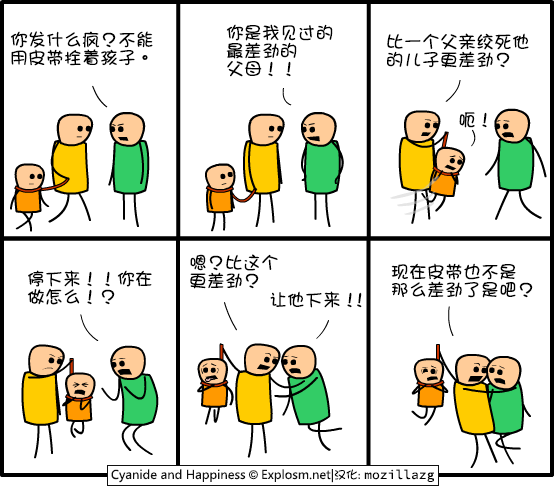
<style>
.page{position:relative;width:555px;height:487px;background:#ffffff}
.page>*{position:absolute;margin:0}
.t1{font:18px/18px "DFGirl";color:#000000}
.t2{font:18px "DFGirl";color:#000000}
.t3{font:18px "DFGirl";letter-spacing:-0.46em;color:#000000}
</style>
<div class="page">
<p class="t1" style="left:226px;top:24px;width:107px;height:53px">你是我见过的<br>最差劲的<br>父母！！</p>
<p class="t1" style="left:10px;top:31px;width:143px;height:35px">你发什么疯？不能<br>用皮带拴着孩子。</p>
<p class="t1" style="left:387px;top:33px;width:142px;height:35px">比一个父亲绞死他<br>的儿子更差劲？</p>
<p class="t2" style="left:459px;top:112px;width:28px;height:16px">呃！</p>
<p class="t1" style="left:190px;top:254px;width:88px;height:35px">嗯？比这个<br>更差劲？</p>
<p class="t1" style="left:27px;top:270px;width:125px;height:35px">停下来！！你在<br>做怎么！？</p>
<p class="t1" style="left:391px;top:263px;width:142px;height:35px">现在皮带也不是<br>那么差劲了是吧？</p>
<p class="t2" style="left:270px;top:291px;width:92px;height:17px">让他下来<span class="t3">！！</span></p>
</div>
